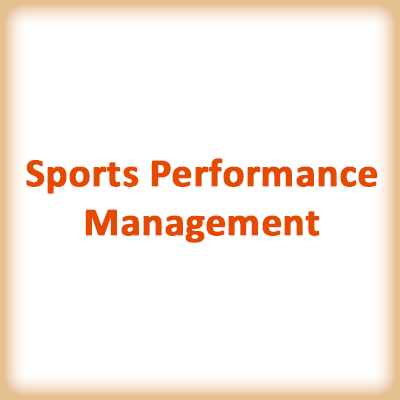
<style>
.page{position:relative;width:400px;height:400px;background:#ffffff}
.page>*{position:absolute;margin:0}
.t1{font:40.5px "Calibri-Bold";color:#e54b00;font-weight:bold}
</style>
<div class="page">
<p class="t1" style="left:26px;top:158px;width:352px;height:85px;text-align:center">Sports Performance<br>Management</p>
</div>
